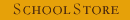
<style>
.page{position:relative;width:130px;height:20px;background:#e6a109}
.page>*{position:absolute;margin:0}
.t1{font:12.5px "Garamond";color:#4c290d}
.t2{font:16.7px "Garamond";color:#4c290d}
</style>
<div class="page">
<p class="t1" style="left:13px;top:3px;width:106px;height:12px"><span class="t2">S  </span>C H O O L <span class="t2">S  </span>T O R E</p>
</div>
